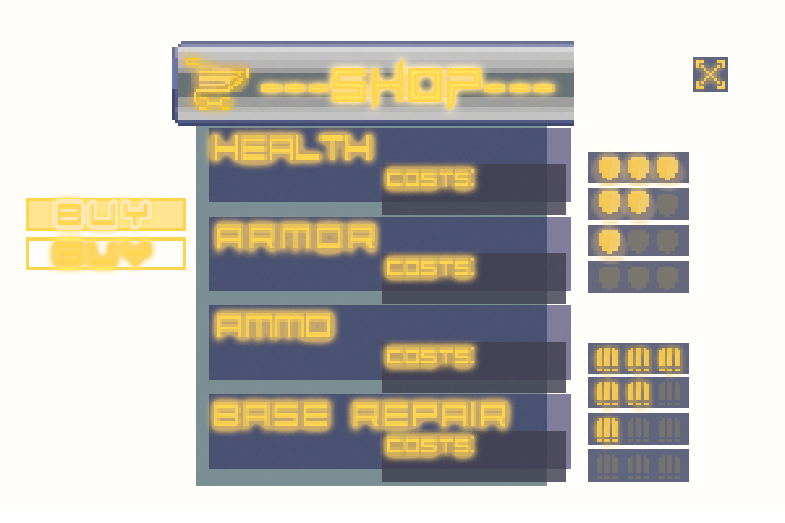
<style>
.page{position:relative;width:785px;height:523px;background:#fffefa}
.page>*{position:absolute;margin:0}
.t1{font:17.6px "Abstract";color:#ffd550;scale:0.56 1}
.t2{font:17.6px "Abstract";letter-spacing:-0.12em;color:#ffd550;scale:0.56 1}
.t3{font:11.3px "Abstract";letter-spacing:0.18em;color:#ffd550;scale:0.52 1}
.t4{font:16.8px "Abstract";letter-spacing:0.6em;color:#ffd550;scale:0.59 1}
.t5{font:17.6px "Abstract";letter-spacing:0.5em;color:#ffd550;scale:0.56 1}
.t6{font:17.6px "Abstract";letter-spacing:0.26em;color:#ffd550;scale:0.56 1}
</style>
<div class="page">
<p class="t1" style="left:211px;top:135px;width:161px;height:28px">hea<span class="t2">lt</span>h</p>
<p class="t3" style="left:387px;top:169px;width:87px;height:20px">Costs:</p>
<p class="t4" style="left:54px;top:201px;width:96px;height:27px">BUY</p>
<p class="t5" style="left:217px;top:224px;width:158px;height:28px">Armor</p>
<p class="t4" style="left:54px;top:240px;width:96px;height:27px">BUY</p>
<p class="t3" style="left:387px;top:258px;width:87px;height:20px">Costs:</p>
<p class="t1" style="left:217px;top:313px;width:116px;height:27px">Ammo</p>
<p class="t3" style="left:387px;top:347px;width:87px;height:20px">Costs:</p>
<p class="t6" style="left:214px;top:402px;width:294px;height:27px">Base Repair</p>
<p class="t3" style="left:387px;top:436px;width:87px;height:20px">Costs:</p>
</div>
